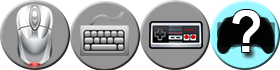
<style>
.page{position:relative;width:280px;height:70px;background:#959595}
.page>*{position:absolute;margin:0}
.t1{font:57px "ArialMT";color:#ffffff;font-weight:bold}
</style>
<div class="page">
<p class="t1" style="left:232px;top:10px;width:28px;height:42px">?</p>
</div>
